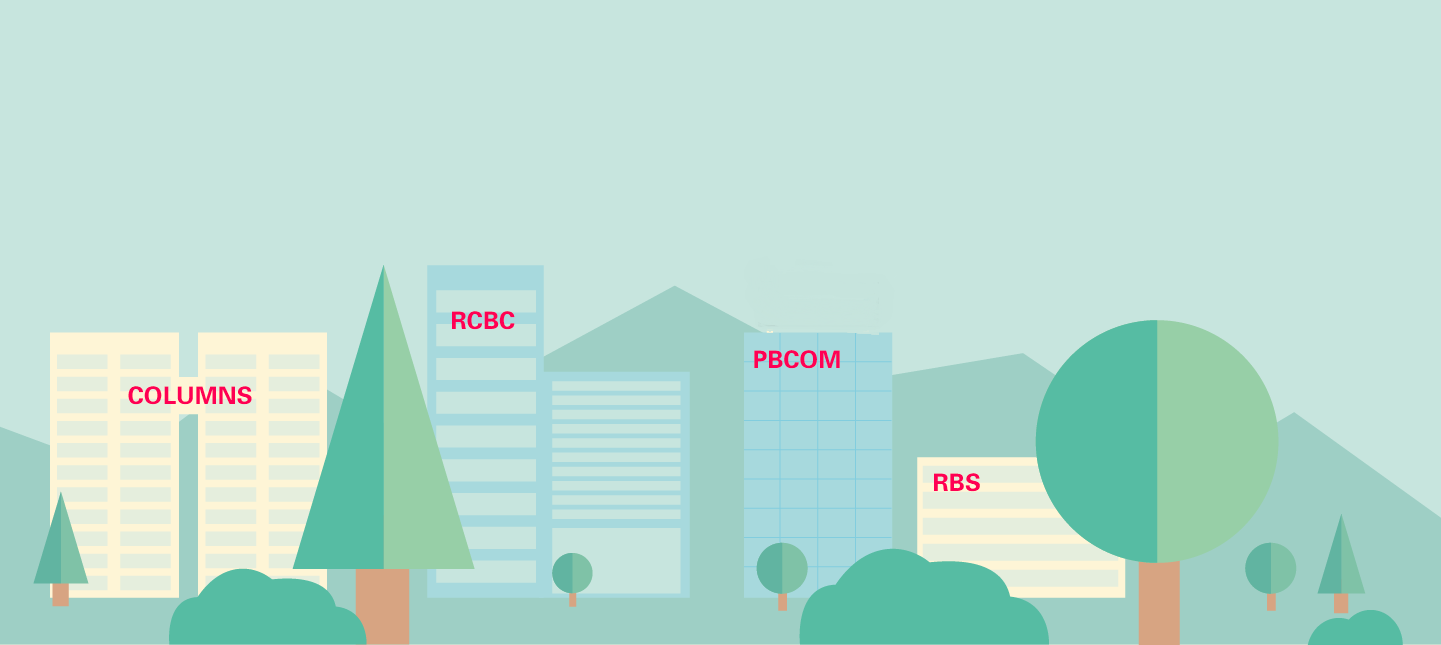
<style>
.page{position:relative;width:1441px;height:645px;background:#c7e5de}
.page>*{position:absolute;margin:0}
.t1{font:24px "FZDHTFW--GB1-0";color:#ff0054}
</style>
<div class="page">
<p class="t1" style="left:452px;top:311px;width:63px;height:19px">RCBC</p>
<p class="t1" style="left:754px;top:350px;width:86px;height:19px">PBCOM</p>
<p class="t1" style="left:128px;top:386px;width:124px;height:19px">COLUMNS</p>
<p class="t1" style="left:934px;top:473px;width:46px;height:19px">RBS</p>
</div>
